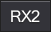
<style>
.page{position:relative;width:51px;height:32px;background:#333339}
.page>*{position:absolute;margin:0}
.t1{font:16px "MicrosoftSansSerif";letter-spacing:-0.04em;color:#ffffff}
</style>
<div class="page">
<p class="t1" style="left:11px;top:10px;width:29px;height:12px">RX2</p>
</div>
